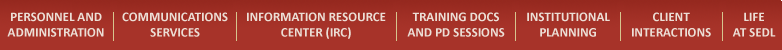
<style>
.page{position:relative;width:782px;height:50px;background:#a73329}
.page>*{position:absolute;margin:0}
.t1{font:13px "Calibri-Bold";color:#ecded5}
</style>
<div class="page">
<p class="t1" style="left:7px;top:12px;width:97px;height:25px;text-align:center">PERSONNEL AND<br>ADMINISTRATION</p>
<p class="t1" style="left:122px;top:12px;width:106px;height:25px;text-align:center">COMMUNICATIONS<br>SERVICES</p>
<p class="t1" style="left:247px;top:12px;width:139px;height:27px;text-align:center">INFORMATION RESOURCE<br>CENTER (IRC)</p>
<p class="t1" style="left:407px;top:12px;width:98px;height:25px;text-align:center">TRAINING DOCS<br>AND PD SESSIONS</p>
<p class="t1" style="left:527px;top:12px;width:83px;height:25px;text-align:center">INSTITUTIONAL<br>PLANNING</p>
<p class="t1" style="left:632px;top:12px;width:79px;height:25px;text-align:center">CLIENT<br>INTERACTIONS</p>
<p class="t1" style="left:732px;top:12px;width:44px;height:25px;text-align:center">LIFE<br>AT SEDL</p>
</div>
